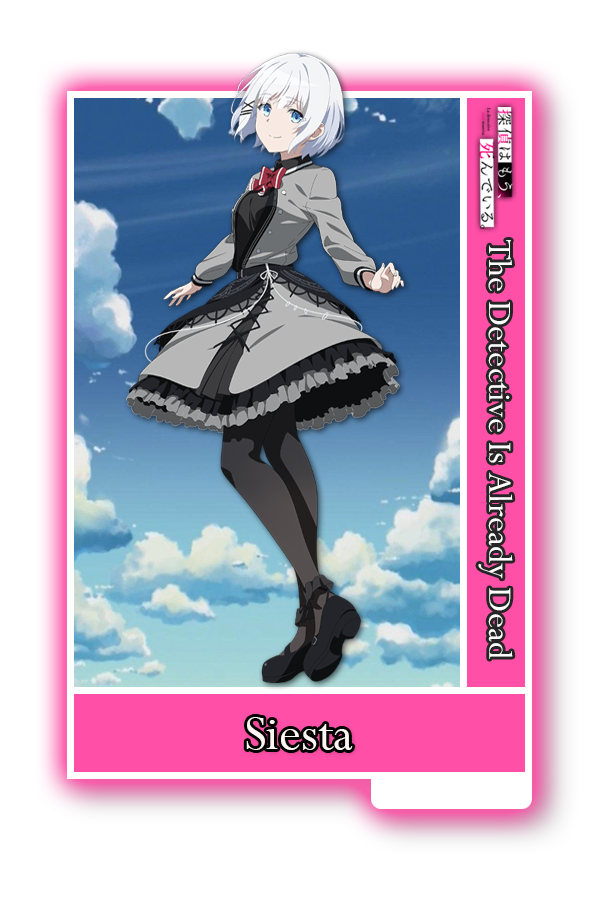
<style>
.page{position:relative;width:600px;height:900px;background:#ffffff}
.page>*{position:absolute;margin:0}
.t1{font:36.5px "Perpetua";color:#ffffff;scale:1.04 1}
.t2{font:54.2px "Perpetua";color:#fff5f5}
</style>
<div class="page">
<p class="t1" style="left:478px;top:240px;width:35px;height:419px;rotate:90deg">The Detective Is Already Dead</p>
<p class="t2" style="left:246px;top:717px;width:107px;height:33px">Siesta</p>
</div>
